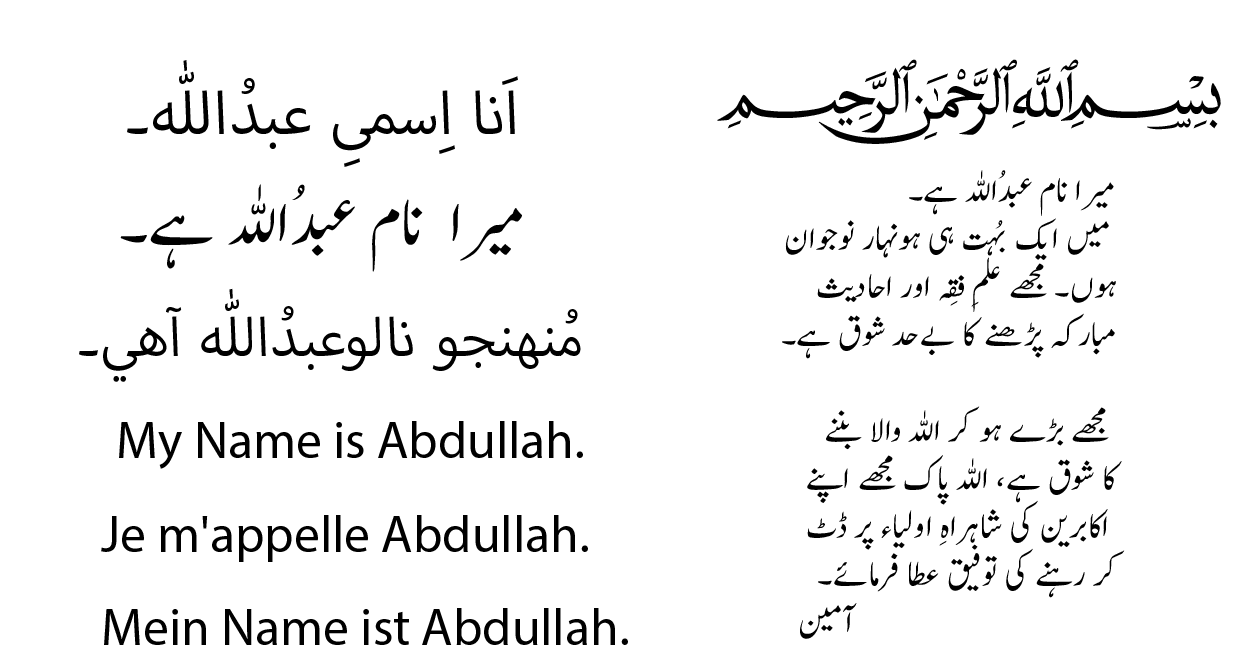
<style>
.page{position:relative;width:1242px;height:666px;background:#ffffff}
.page>*{position:absolute;margin:0}
.t1{font:84px "MyriadArabic-Regular";color:#000000}
.t2{font:93px "MicrosoftUighur";color:#000000}
.t3{font:40px "Jameel-Noori-Nastaleeq";color:#000000}
.t4{font:76px "Jameel-Noori-Nastaleeq";color:#000000}
.t5{font:76px "MyriadArabic-Regular";color:#000000}
.t6{font:52px "MyriadPro-Regular";color:#000000}
</style>
<div class="page">
<p class="t1" style="left:127px;top:60px;width:391px;height:107px">اَنا اِسمىِ عبدُاللّٰه۔</p>
<p class="t2" style="left:717px;top:59px;width:504px;height:85px">﷽</p>
<p class="t3" style="left:782px;top:170px;width:343px;height:469px;text-align:right">میرا نام عبدُاللہ ہے۔<br> میں ایک بُہت ہی ہونہار نوجوان <br>ہوں۔ مجھے علمِ فِقہ اور احادیث<br>مبارکہ پڑھنے کا بےحد شوق ہے۔<br><br>مجھے بڑے ہو کر اللہ والا بننے <br>کا شوق ہے، اللہ پاک مجھے اپنے<br>اکابرین کی شاہراہِ اولیاء پر ڈٹ <br>کر رہنے کی توفیق عطا فرمائے۔<br>آمین</p>
<p class="t4" style="left:120px;top:184px;width:402px;height:88px">میرا  نام عبدُاللہ ہے۔</p>
<p class="t5" style="left:79px;top:288px;width:502px;height:94px">مُنهنجو نالوعبدُاللّٰه آهي۔</p>
<p class="t6" style="left:119px;top:421px;width:464px;height:48px">My Name is Abdullah.</p>
<p class="t6" style="left:101px;top:515px;width:487px;height:47px">Je m'appelle Abdullah.</p>
<p class="t6" style="left:104px;top:608px;width:524px;height:37px">Mein Name ist Abdullah.</p>
</div>
